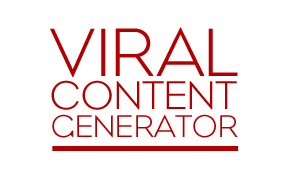
<style>
.page{position:relative;width:290px;height:180px;background:#ffffff}
.page>*{position:absolute;margin:0}
.t1{font:41px/33px "Eagle-Light";color:#b20000}
.t2{font:70px/33px "Eagle-Light";color:#b20000}
.t3{font:70px/33px "Eagle-Light";letter-spacing:0.04em;color:#b20000}
.t4{font:32px/28px "Eagle-Light";color:#b20000}
.t5{font:32px/28px "Eagle-Light";letter-spacing:0.02em;color:#b20000}
</style>
<div class="page">
<p class="t1" style="left:50px;top:27px;width:188px;height:111px;text-align:center"><span class="t2">VI</span><span class="t3">R</span><span class="t2">AL<br></span>CONTENT<br><span class="t4">GENE</span><span class="t5">R</span><span class="t4">ATOR</span></p>
</div>
